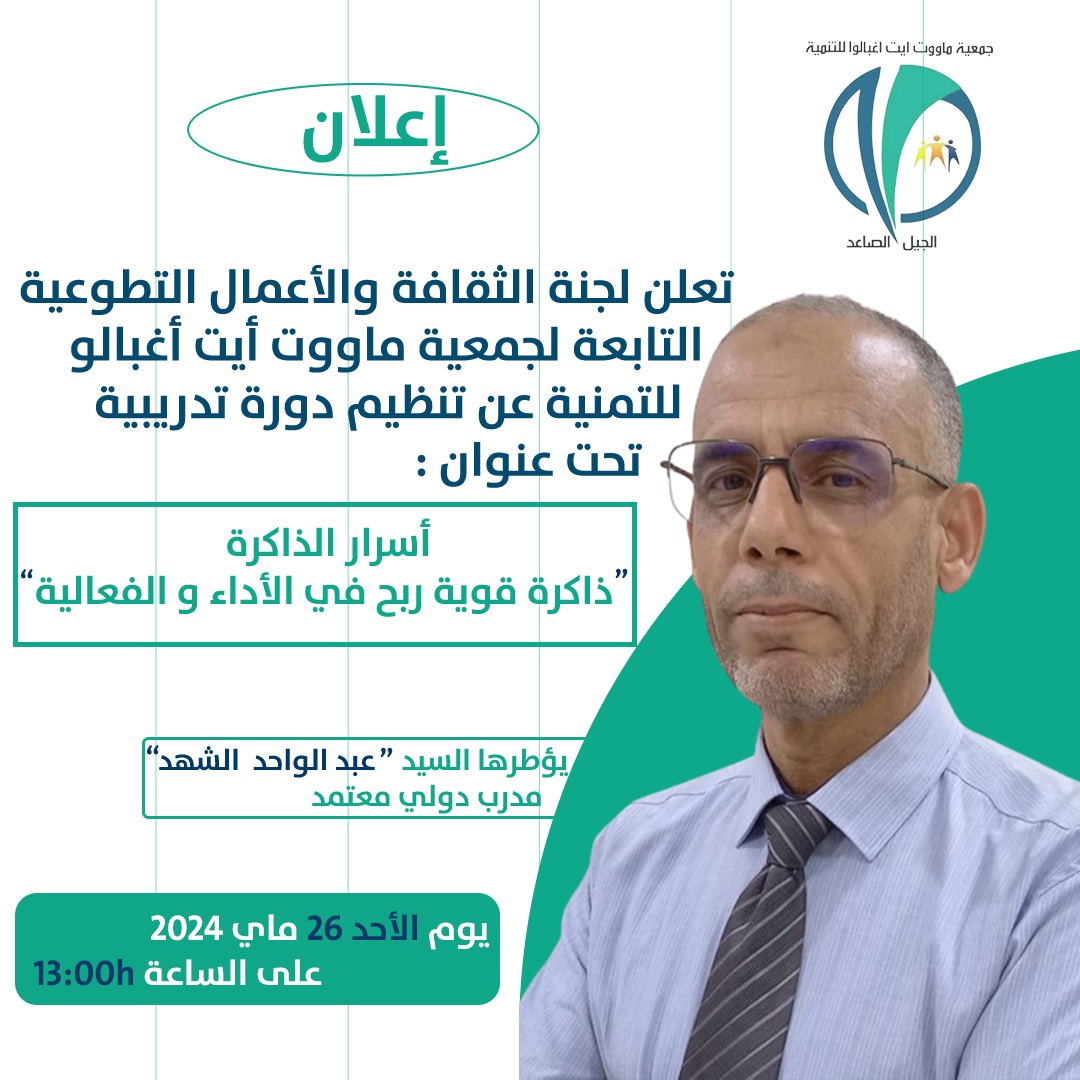
<style>
.page{position:relative;width:1080px;height:1080px;background:#ffffff}
.page>*{position:absolute;margin:0}
.t1{font:72px "TheSansArabic-Bold";color:#0ea98a}
.t2{font:48px "TheSansArabic-Bold";color:#024a6e}
.t3{font:40px "TheSansArabic-Bold";color:#0ea98a}
.t4{font:30px "TheSansArabic-Bold";color:#00386a}
.t5{font:30px "TheSansArabic-Bold";color:#0ea98a}
.t6{font:36px "TheSansArabic-Bold";color:#00386a}
.t7{font:36px "TheSansArabic-Bold";color:#ffffff}
</style>
<div class="page">
<p class="t1" style="left:303px;top:94px;width:146px;height:71px">إعلان</p>
<p class="t2" style="left:20px;top:264px;width:714px;height:224px">تعلن لجنة الثقافة والأعمال التطوعية<br>   التابعة لجمعية ماووت أيت أغبالو<br>     للتمنية عن تنظيم دورة تدريبية<br>         تحت عنوان :</p>
<p class="t3" style="left:36px;top:518px;width:576px;height:99px;text-align:center">أسرار الذاكرة<br> ذاكرة قوية ربح في الأداء و الفعالية</p>
<p class="t4" style="left:21px;top:568px;width:12px;height:11px">“</p>
<p class="t4" style="left:615px;top:568px;width:13px;height:11px;rotate:180deg">“</p>
<p class="t4" style="left:147px;top:744px;width:12px;height:11px">“</p>
<p class="t4" style="left:159px;top:746px;width:409px;height:68px"><span class="t5">يؤطرها السيد    </span>عبد الواحد  الشهد<span class="t5">   <br>    مدرب دولي معتمد</span></p>
<p class="t4" style="left:380px;top:747px;width:13px;height:11px;rotate:180deg">“</p>
<p class="t6" style="left:151px;top:911px;width:339px;height:39px"><span class="t7">يوم </span>الأحد 26<span class="t7"> ماي 2024</span></p>
<p class="t7" style="left:34px;top:958px;width:288px;height:28px">على الساعة <span class="t6">13:00h</span></p>
</div>
